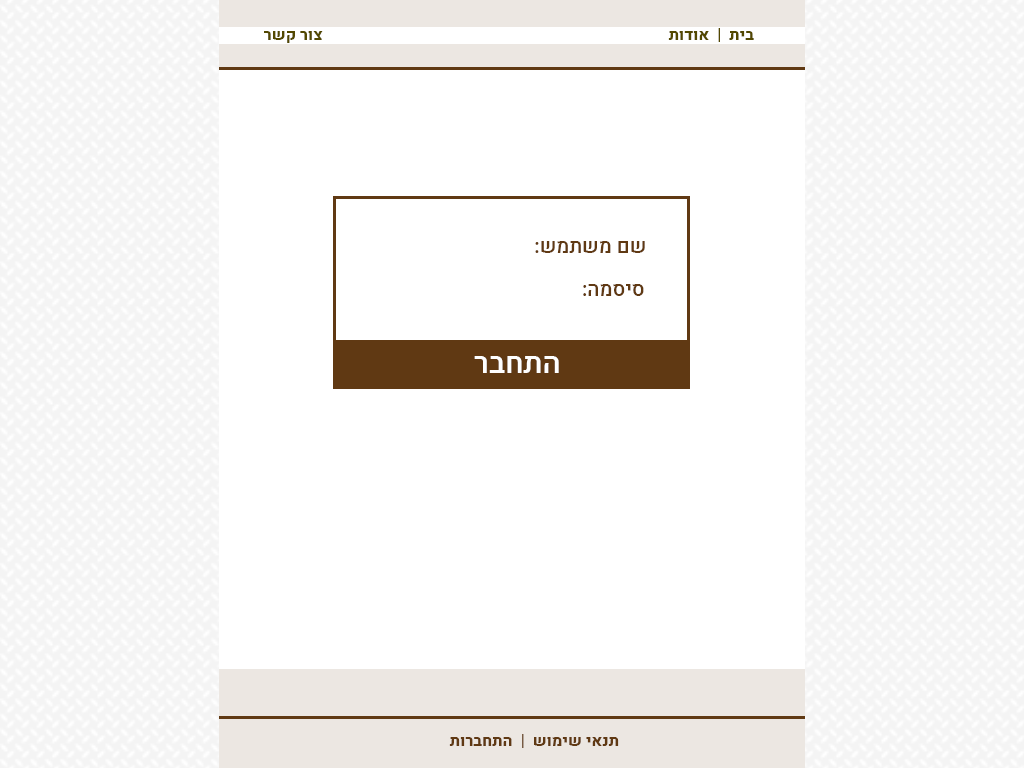
<style>
.page{position:relative;width:1024px;height:768px;background:#ffffff}
.page>*{position:absolute;margin:0}
.t1{font:20px "Heebo-Medium";color:#603913}
.t2{font:30px "Heebo-Medium";color:#ffffff}
.t3{font:16px "Heebo-ExtraBold";color:#603913}
</style>
<div class="page">
<p class="t1" style="left:535px;top:241px;width:110px;height:12px">שם משתמש:</p>
<p class="t1" style="left:583px;top:284px;width:61px;height:12px">סיסמה:</p>
<p class="t2" style="left:474px;top:356px;width:85px;height:17px">התחבר</p>
<p class="t3" style="left:449px;top:734px;width:170px;height:14px">תנאי שימוש  |  התחברות</p>
</div>
